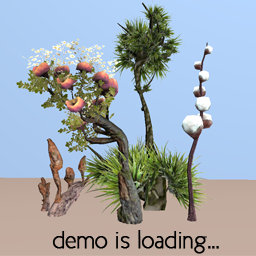
<style>
.page{position:relative;width:256px;height:256px}
.page>*{position:absolute;margin:0}
.t1{font:23.7px "NewCicle-Fina";color:#000000;font-weight:bold}
</style>
<div class="page">
<p class="t1" style="left:52px;top:230px;width:167px;height:24px">demo is loading...</p>
</div>
